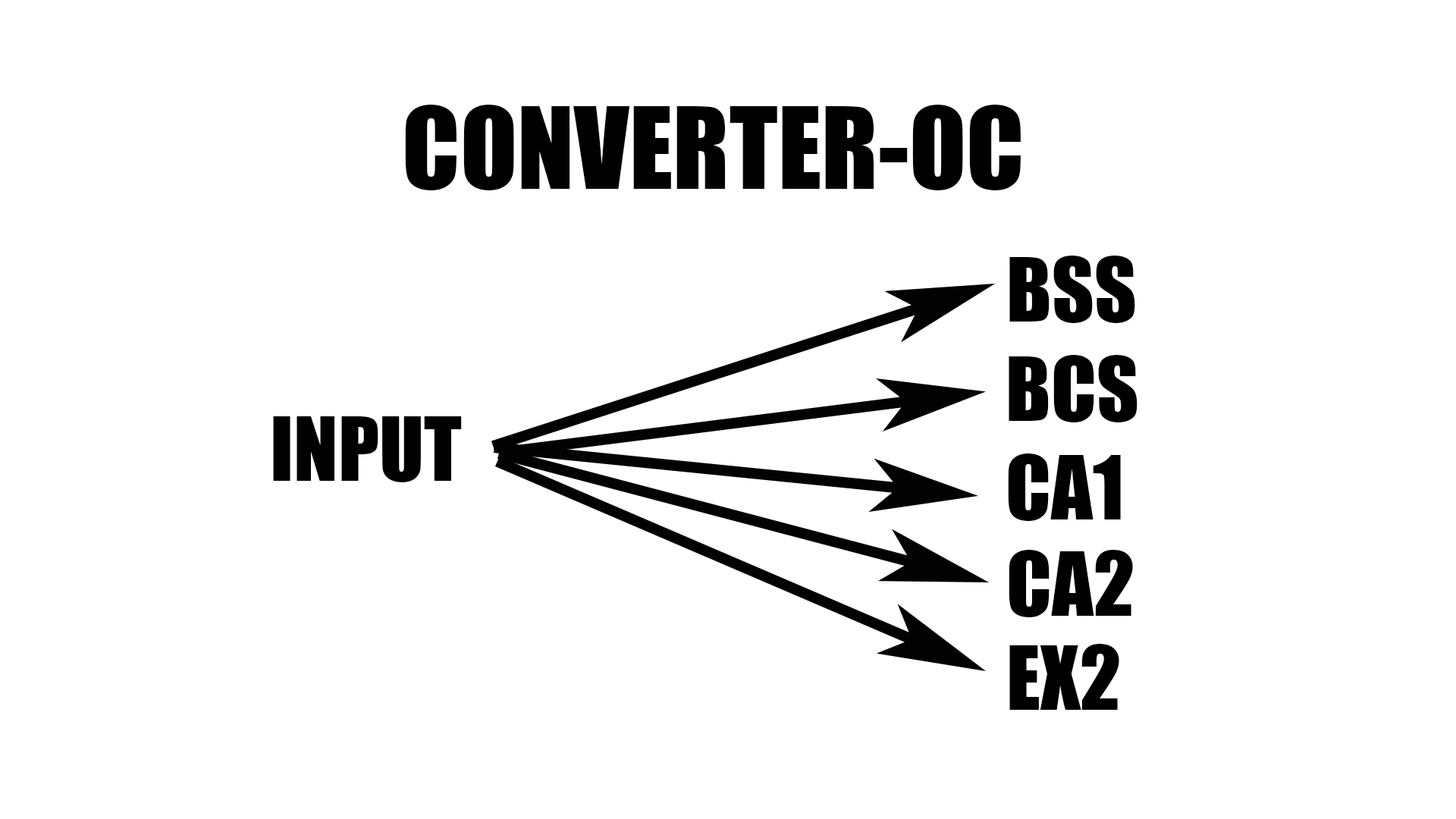
<style>
.page{position:relative;width:1456px;height:819px;background:#ffffff}
.page>*{position:absolute;margin:0}
.t1{font:104.7px "Impact";color:#000000}
.t2{font:82.1px "Impact";color:#000000}
</style>
<div class="page">
<p class="t1" style="left:405px;top:105px;width:616px;height:85px">CONVERTER-OC</p>
<p class="t2" style="left:1009px;top:256px;width:126px;height:67px">BSS</p>
<p class="t2" style="left:1009px;top:355px;width:128px;height:67px">BCS</p>
<p class="t2" style="left:273px;top:416px;width:189px;height:66px">INPUT</p>
<p class="t2" style="left:1008px;top:453px;width:113px;height:68px">CA1</p>
<p class="t2" style="left:1009px;top:550px;width:124px;height:67px">CA2</p>
<p class="t2" style="left:1009px;top:644px;width:110px;height:66px">EX2</p>
</div>
